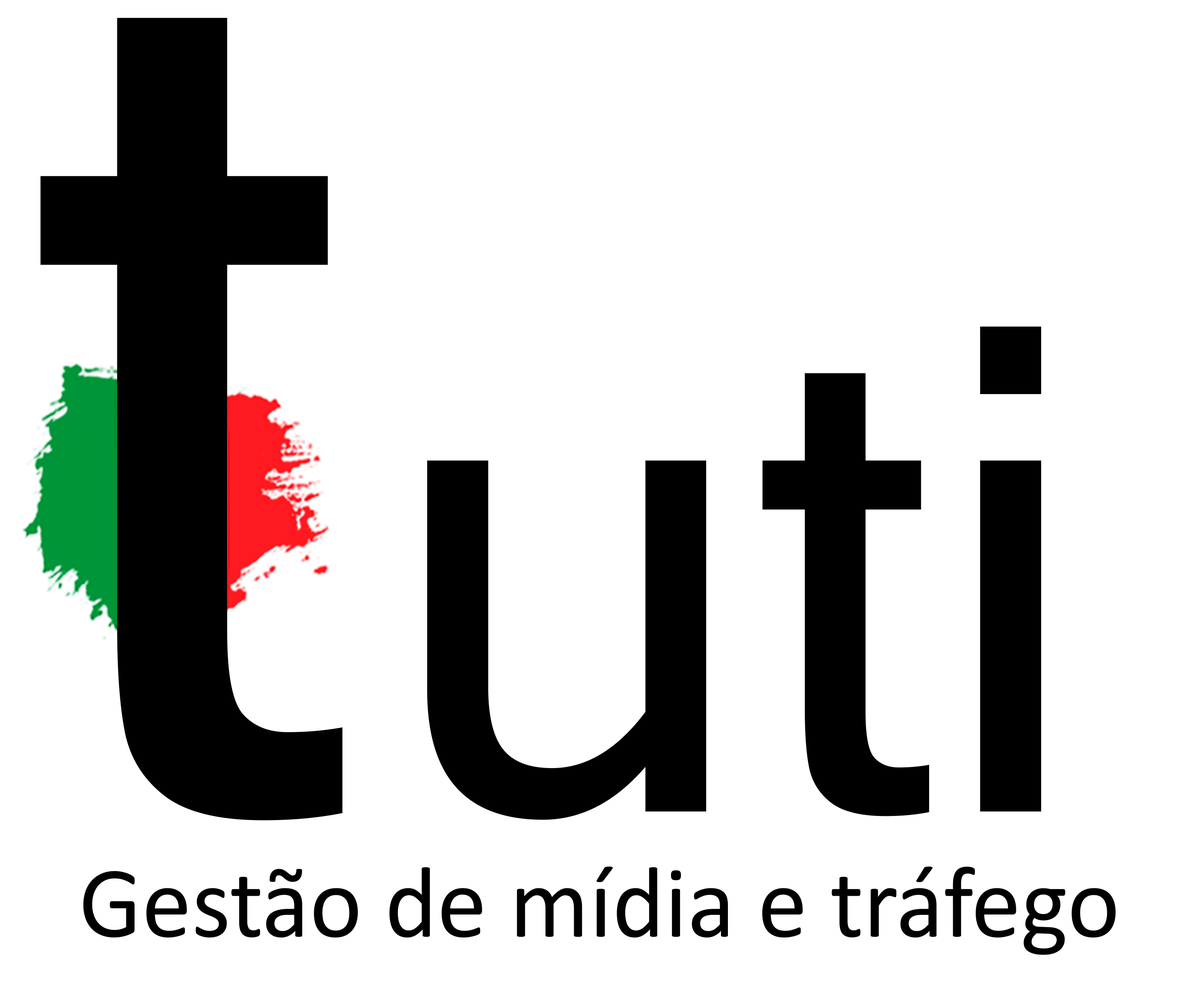
<style>
.page{position:relative;width:1199px;height:995px;background:#ffffff}
.page>*{position:absolute;margin:0}
.t1{font:1227.2px "MicrosoftSansSerif";color:#000000}
.t2{font:677.3px "MicrosoftSansSerif";color:#000000}
.t3{font:102.2px "Calibri";color:#000000}
</style>
<div class="page">
<p class="t1" style="left:40px;top:18px;width:303px;height:802px">t</p>
<p class="t2" style="left:427px;top:326px;width:614px;height:494px">uti</p>
<p class="t3" style="left:83px;top:866px;width:1032px;height:89px">Gestão de mídia e tráfego</p>
</div>
